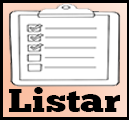
<style>
.page{position:relative;width:129px;height:120px;background:#ffffff}
.page>*{position:absolute;margin:0}
.t1{font:33.1px "ChunkFiveEx";color:#000000;scale:1.21 1}
</style>
<div class="page">
<p class="t1" style="left:9px;top:87px;width:111px;height:25px">Listar</p>
</div>
